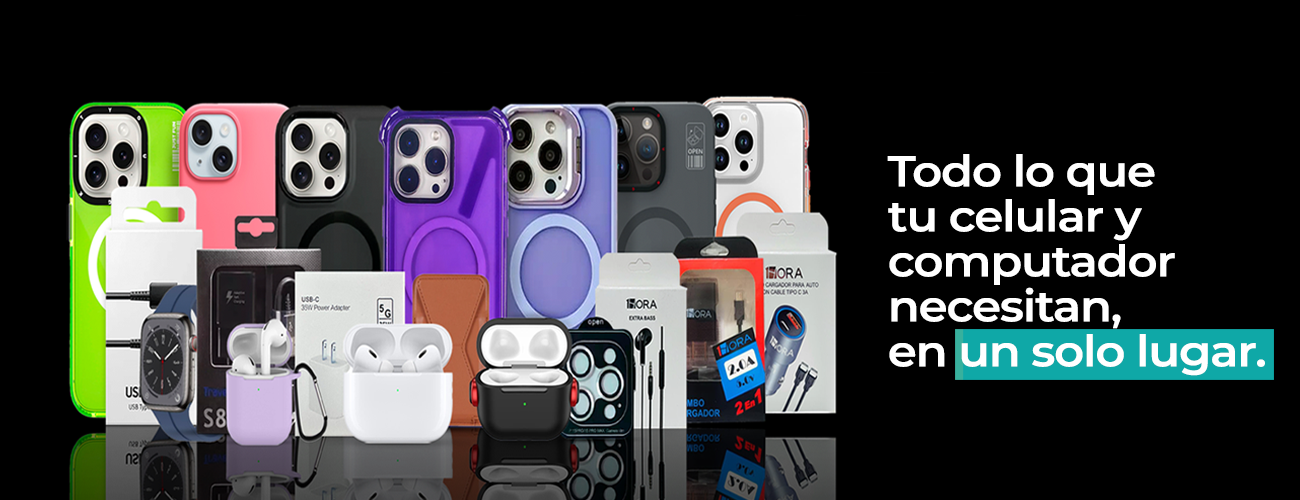
<style>
.page{position:relative;width:1300px;height:500px;background:#000000}
.page>*{position:absolute;margin:0}
.t1{font:43.4px/45px "Montserrat-SemiBold";letter-spacing:-0.025em;color:#ffffff;scale:1.07 1}
</style>
<div class="page">
<p class="t1" style="left:887px;top:154px;width:378px;height:222px">Todo lo que<br>tu celular y <br>computador<br>necesitan, <br>en un solo lugar.</p>
</div>
